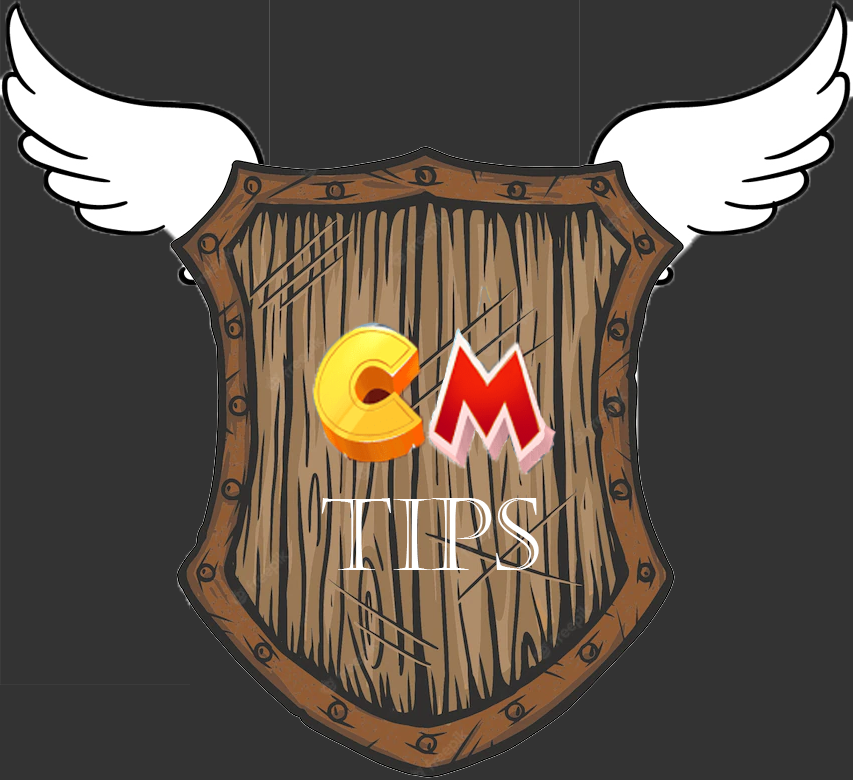
<style>
.page{position:relative;width:853px;height:780px;background:#333333}
.page>*{position:absolute;margin:0}
.t1{font:100px "Castellar";color:#ffffff}
</style>
<div class="page">
<p class="t1" style="left:321px;top:498px;width:218px;height:72px">TIPS</p>
</div>
